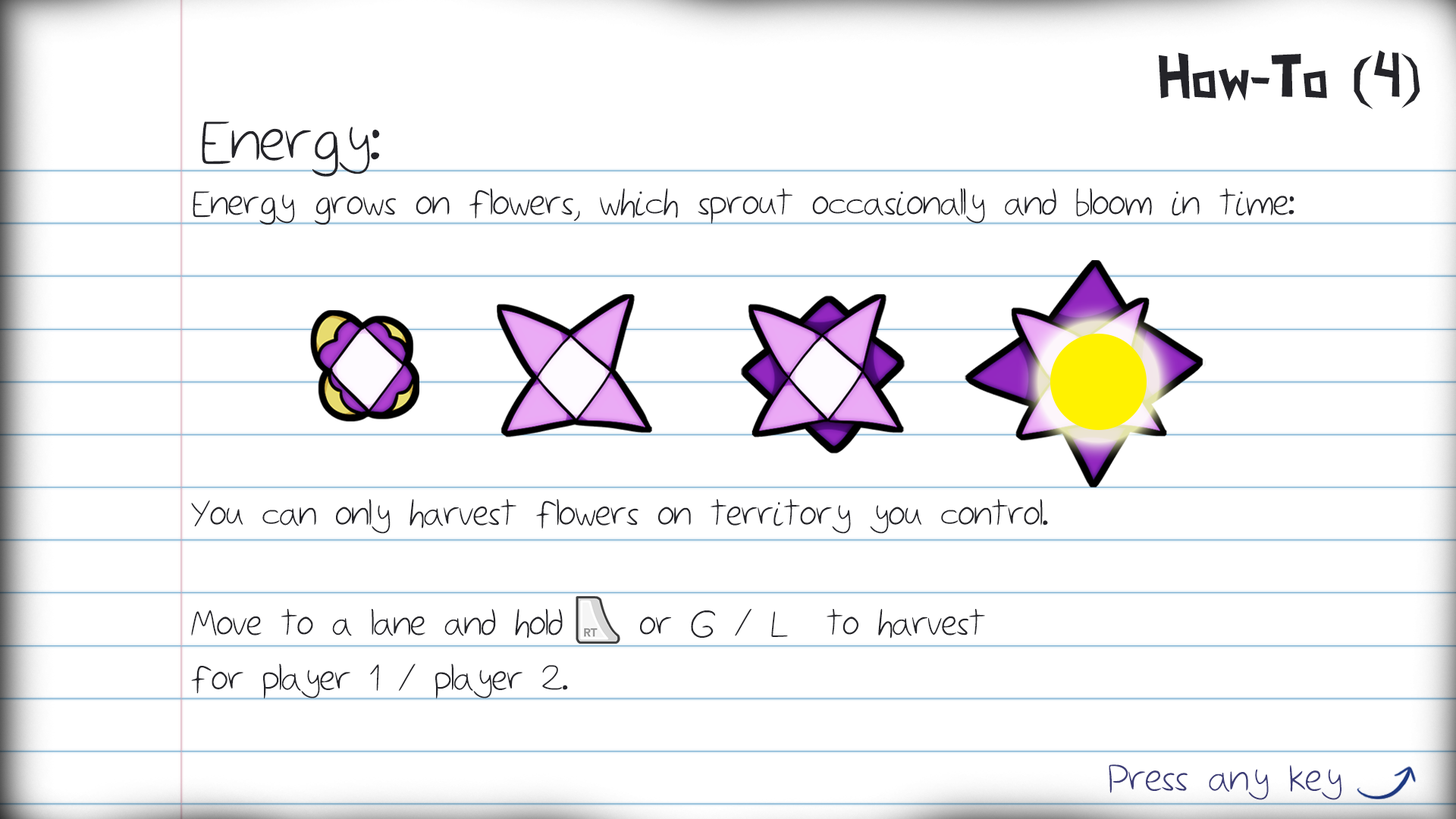
<style>
.page{position:relative;width:1456px;height:819px;background:#ffffff}
.page>*{position:absolute;margin:0}
.t1{font:59.5px "PaperCuts2";color:#242429}
.t2{font:77px "Sketchbook";color:#242429}
.t3{font:46.5px "Sketchbook";color:#242429}
.t4{font:45.8px "Sketchbook";color:#242429}
.t5{font:49.6px "Sketchbook";color:#3d3d78}
</style>
<div class="page">
<p class="t1" style="left:1159px;top:50px;width:261px;height:59px">How-To (4)</p>
<p class="t2" style="left:202px;top:121px;width:178px;height:56px">Energy:</p>
<p class="t3" style="left:193px;top:188px;width:1101px;height:37px">Energy grows on flowers, which sprout occasionally and bloom in time:</p>
<p class="t4" style="left:191px;top:499px;width:857px;height:200px">You can only harvest flowers on territory you control.<br><br>Move to a lane and hold    or G / L  to harvest<br>for player 1 / player 2.</p>
<p class="t5" style="left:1109px;top:764px;width:232px;height:36px">Press any key</p>
</div>
